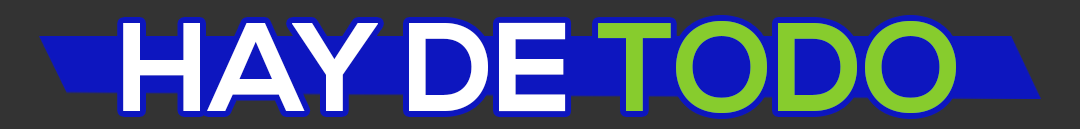
<style>
.page{position:relative;width:1080px;height:129px;background:#333333}
.page>*{position:absolute;margin:0}
.t1{font:126px "NexaBold";color:#ffffff}
.t2{font:126px "NexaBold";color:#87cc2d}
</style>
<div class="page">
<p class="t1" style="left:123px;top:21px;width:833px;height:92px">HAY DE<span class="t2"> TODO</span></p>
</div>
